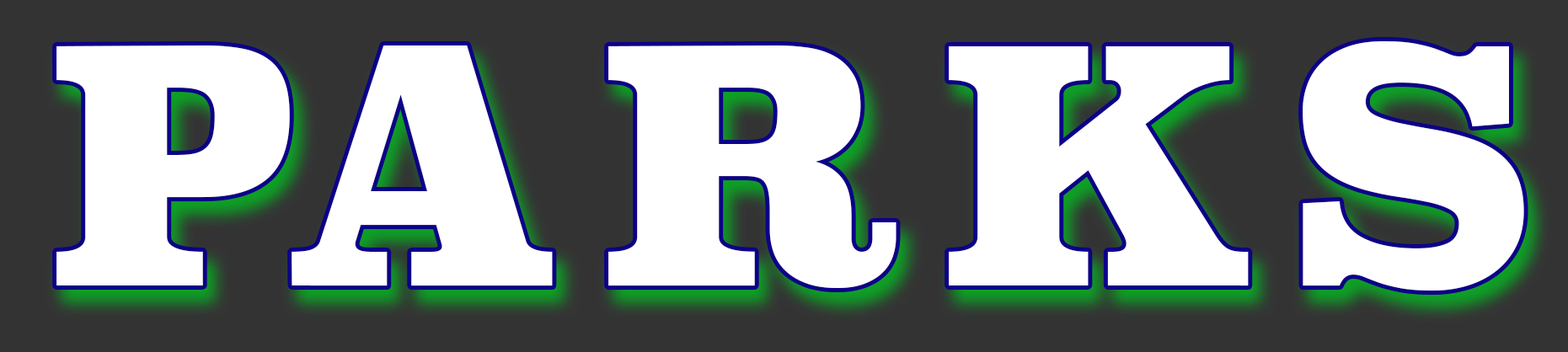
<style>
.page{position:relative;width:1568px;height:352px;background:#333333}
.page>*{position:absolute;margin:0}
.t1{font:323px "Superclarendon-Black";letter-spacing:0.1em;color:#ffffff;text-transform:uppercase}
</style>
<div class="page">
<p class="t1" style="left:56px;top:41px;width:1468px;height:250px">Parks</p>
</div>
